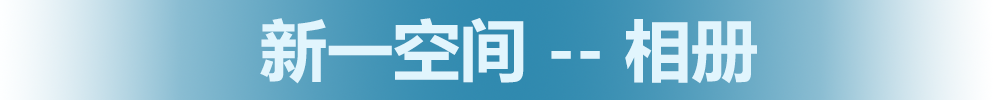
<style>
.page{position:relative;width:1000px;height:100px}
.page>*{position:absolute;margin:0}
.t1{font:66.7px "MicrosoftYaHei-Bold";color:#e1f5fd}
</style>
<div class="page">
<p class="t1" style="left:260px;top:18px;width:497px;height:66px">新一空间 -- 相册</p>
</div>
